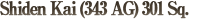
<style>
.page{position:relative;width:208px;height:19px;background:#ffffff}
.page>*{position:absolute;margin:0}
.t1{font:18px "RyuminPro-ExBold";letter-spacing:-0.08em;color:#4a3f32;font-weight:bold;scale:0.9 1}
</style>
<div class="page">
<p class="t1" style="left:0px;top:0px;width:189px;height:19px">Shiden Kai (343 AG) 301 Sq.</p>
</div>
